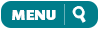
<style>
.page{position:relative;width:100px;height:30px;background:#007d8a}
.page>*{position:absolute;margin:0}
.t1{font:14px "PrentonRPProBlack-Regular";color:#ffffff}
</style>
<div class="page">
<p class="t1" style="left:12px;top:10px;width:44px;height:10px">MENU</p>
</div>
